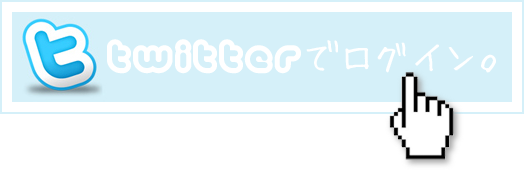
<style>
.page{position:relative;width:524px;height:170px;background:#ffffff}
.page>*{position:absolute;margin:0}
.t1{font:45px "PicoWhiteAl";color:#ffffff}
.t2{font:40px "HuiFontP";color:#ffffff}
</style>
<div class="page">
<p class="t1" style="left:107px;top:39px;width:389px;height:35px">twitter<span class="t2">でログイン。</span></p>
</div>
